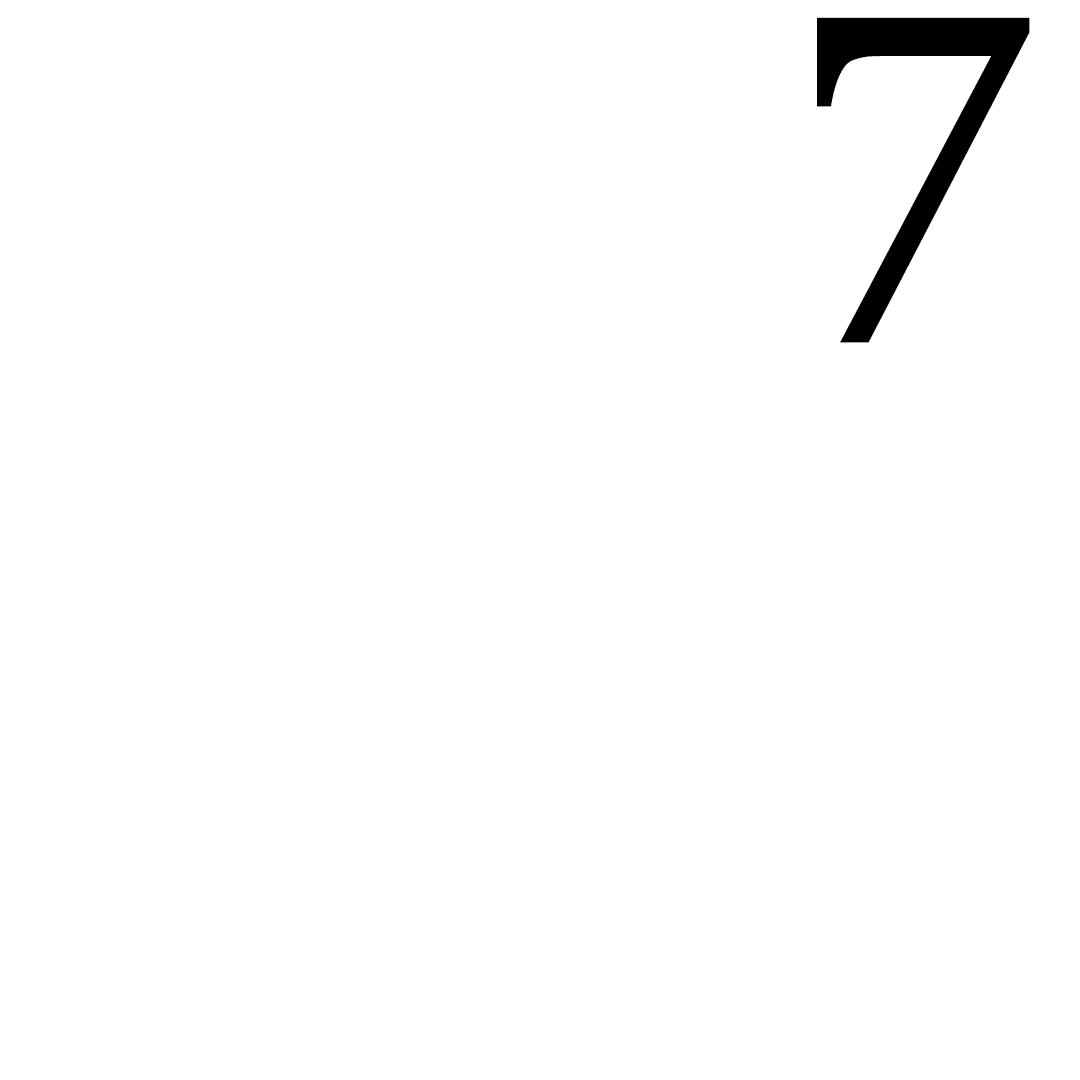
<style>
.page{position:relative;width:1080px;height:1080px;background:#ffffff}
.page>*{position:absolute;margin:0}
.t1{font:462.1px "Georgia";color:#000000}
</style>
<div class="page">
<p class="t1" style="left:817px;top:17px;width:213px;height:326px">7</p>
</div>
